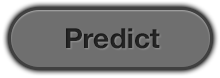
<style>
.page{position:relative;width:220px;height:78px;background:#6f6f6f}
.page>*{position:absolute;margin:0}
.t1{font:27.9px "HelveticaNeue-Bold";color:#252525}
</style>
<div class="page">
<p class="t1" style="left:66px;top:28px;width:94px;height:21px">Predict</p>
</div>
